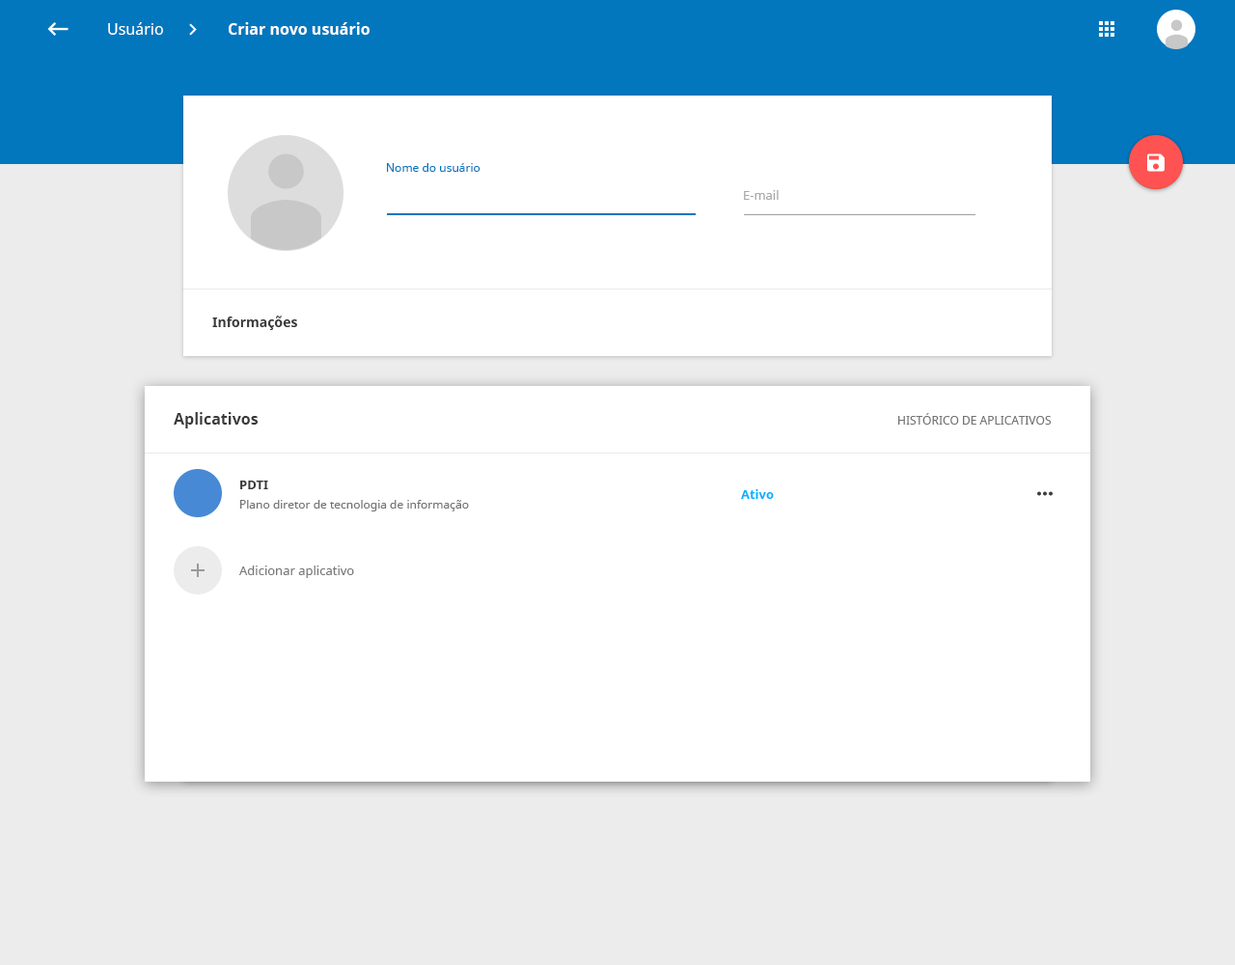
<style>
.page{position:relative;width:1235px;height:965px;background:#ffffff}
.page>*{position:absolute;margin:0}
.t1{font:15.4px "NotoSans";color:#ffffff}
.t2{font:15.4px "NotoSans-Bold";color:#ffffff}
.t3{font:11.6px "NotoSans";color:#0277bd}
.t4{font:12.5px "NotoSans";color:#a7a7a7}
.t5{font:13.5px "NotoSans-Bold";color:#393939}
.t6{font:15.4px "NotoSans-Bold";color:#393939}
.t7{font:11.6px "NotoSans";color:#737373}
.t8{font:12.5px "NotoSans-Bold";color:#393939}
.t9{font:12.5px "NotoSans-Bold";color:#00b0ff}
.t10{font:12.5px "NotoSans";color:#7a7a7a}
</style>
<div class="page">
<p class="t1" style="left:108px;top:22px;width:55px;height:13px">Usuário</p>
<p class="t2" style="left:229px;top:22px;width:141px;height:13px">Criar novo usuário</p>
<p class="t3" style="left:387px;top:163px;width:94px;height:9px">Nome do usuário</p>
<p class="t4" style="left:744px;top:190px;width:35px;height:10px">E-mail</p>
<p class="t5" style="left:212px;top:316px;width:85px;height:14px">Informações</p>
<p class="t6" style="left:174px;top:412px;width:85px;height:17px">Aplicativos</p>
<p class="t7" style="left:899px;top:413px;width:153px;height:12px">HISTÓRICO DE APLICATIVOS</p>
<p class="t8" style="left:240px;top:481px;width:28px;height:8px">PDTI</p>
<p class="t9" style="left:741px;top:489px;width:33px;height:10px">Ativo</p>
<p class="t7" style="left:240px;top:500px;width:229px;height:12px">Plano diretor de tecnologia de informação</p>
<p class="t10" style="left:239px;top:566px;width:115px;height:12px">Adicionar aplicativo</p>
</div>
